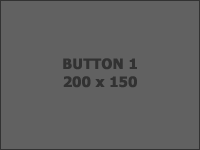
<style>
.page{position:relative;width:200px;height:150px;background:#616161}
.page>*{position:absolute;margin:0}
.t1{font:14px/18px "Tahoma-Bold";letter-spacing:0.01em;color:#323232;font-weight:bold}
</style>
<div class="page">
<p class="t1" style="left:63px;top:58px;width:74px;height:30px;text-align:center">BUTTON 1<br>200 x 150</p>
</div>
